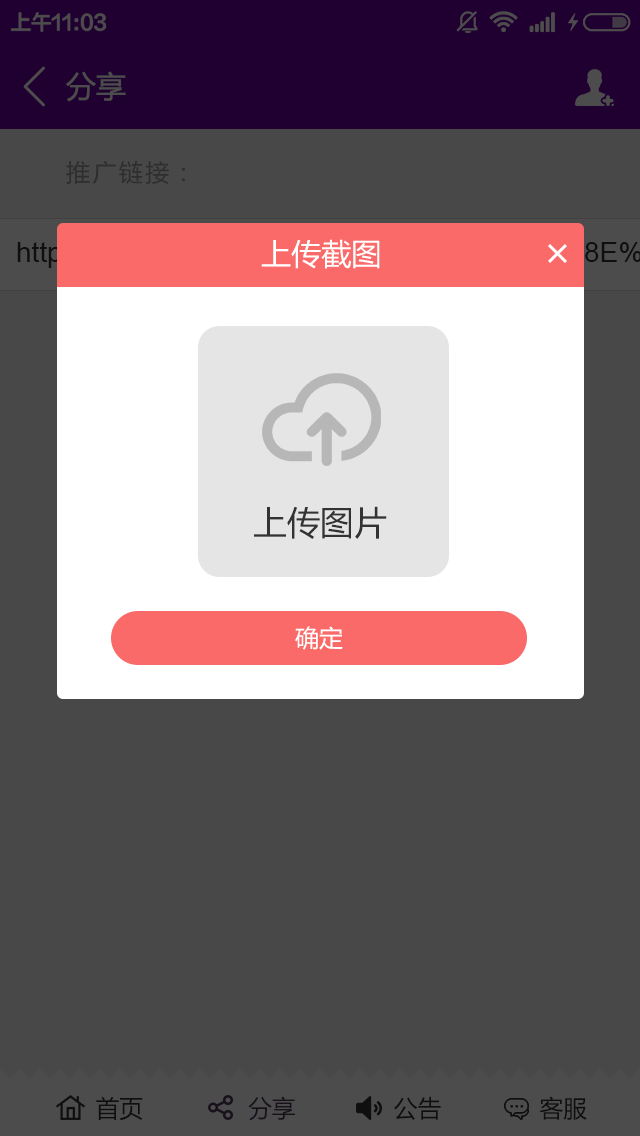
<style>
.page{position:relative;width:640px;height:1136px;background:#484848}
.page>*{position:absolute;margin:0}
.t1{font:30px "MicrosoftYaHei";color:#4c4c4c}
.t2{font:24px "MicrosoftYaHei";letter-spacing:0.1em;color:#2e2e2e}
.t3{font:30px "MicrosoftYaHei";color:#ffffff}
.t4{font:33.5px "MicrosoftYaHei";color:#333333}
.t5{font:24px "MicrosoftYaHei";color:#ffffff}
.t6{font:24px "MicrosoftYaHei";color:#0f0f0f}
</style>
<div class="page">
<p class="t1" style="left:66px;top:71px;width:60px;height:31px">分享</p>
<p class="t2" style="left:66px;top:160px;width:119px;height:25px">推广链接：</p>
<p class="t3" style="left:261px;top:239px;width:119px;height:30px">上传截图</p>
<p class="t4" style="left:254px;top:506px;width:133px;height:33px">上传图片</p>
<p class="t5" style="left:295px;top:626px;width:48px;height:24px">确定</p>
<p class="t6" style="left:96px;top:1096px;width:491px;height:25px">首页               分享              公告              客服</p>
</div>
